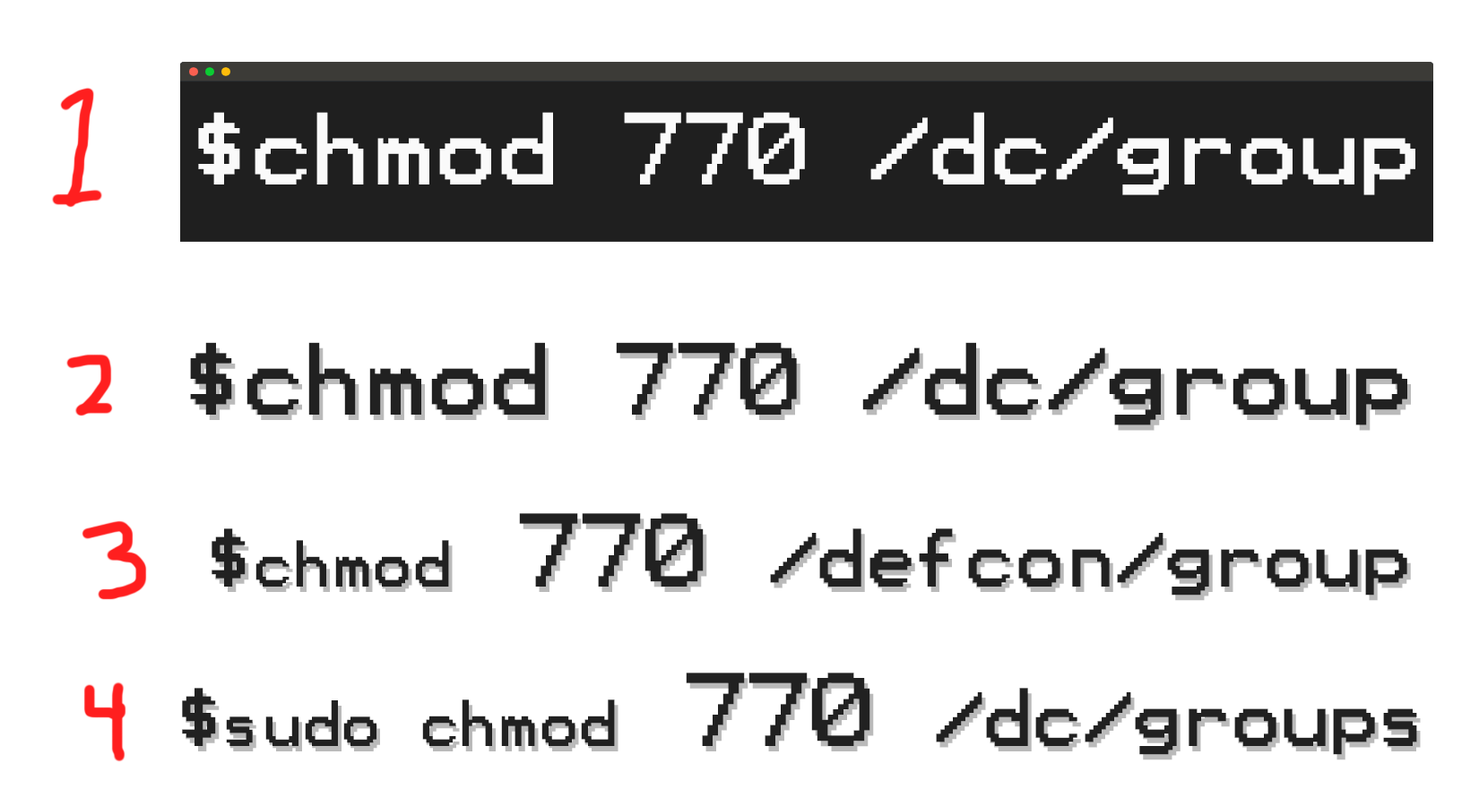
<style>
.page{position:relative;width:1479px;height:806px;background:#ffffff}
.page>*{position:absolute;margin:0}
.t1{font:82.1px "Terminal";color:#fafafa}
.t2{font:82.1px "Terminal";color:#212121}
.t3{font:66.2px "Terminal";color:#212121}
.t4{font:52.9px "Terminal";color:#212121}
.t5{font:83.8px "Terminal";color:#212121}
.t6{font:52.3px "Terminal";color:#212121}
</style>
<div class="page">
<p class="t1" style="left:198px;top:112px;width:1217px;height:83px">$chmod 770 /dc/group</p>
<p class="t2" style="left:190px;top:342px;width:1217px;height:84px">$chmod 770 /dc/group</p>
<p class="t3" style="left:211px;top:513px;width:1196px;height:83px">$<span class="t4">chmod</span><span class="t5"> 770 </span>/defcon/group</p>
<p class="t3" style="left:182px;top:673px;width:1235px;height:82px">$<span class="t6">sudo </span><span class="t4">chmod</span><span class="t5"> 770 </span>/dc/groups</p>
</div>
